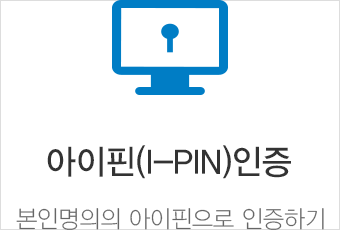
<style>
.page{position:relative;width:340px;height:230px;background:#ffffff}
.page>*{position:absolute;margin:0}
.t1{font:34px "YDVYGO33";color:#333333;scale:0.95 1}
.t2{font:24px "YDVYGO31";color:#666666;scale:0.95 1}
</style>
<div class="page">
<p class="t1" style="left:47px;top:145px;width:244px;height:34px">아이핀(I-PIN)인증</p>
<p class="t2" style="left:16px;top:208px;width:308px;height:22px">본인명의의 아이핀으로 인증하기</p>
</div>
